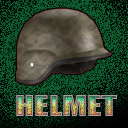
<style>
.page{position:relative;width:128px;height:128px}
.page>*{position:absolute;margin:0}
.t1{font:27.1px "Impact";scale:1.28 1}
</style>
<div class="page">
<p class="t1" style="left:16px;top:95px;width:101px;height:21px">HELMET</p>
</div>
